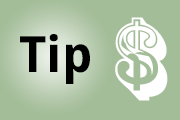
<style>
.page{position:relative;width:180px;height:120px;background:#a4bd99}
.page>*{position:absolute;margin:0}
.t1{font:100px "RosewoodStd-Regular";color:#ffffff}
.t2{font:50px "DroidSans-Bold";color:#000000}
</style>
<div class="page">
<p class="t1" style="left:115px;top:17px;width:53px;height:84px">$</p>
<p class="t2" style="left:20px;top:34px;width:70px;height:50px">Tip</p>
</div>
